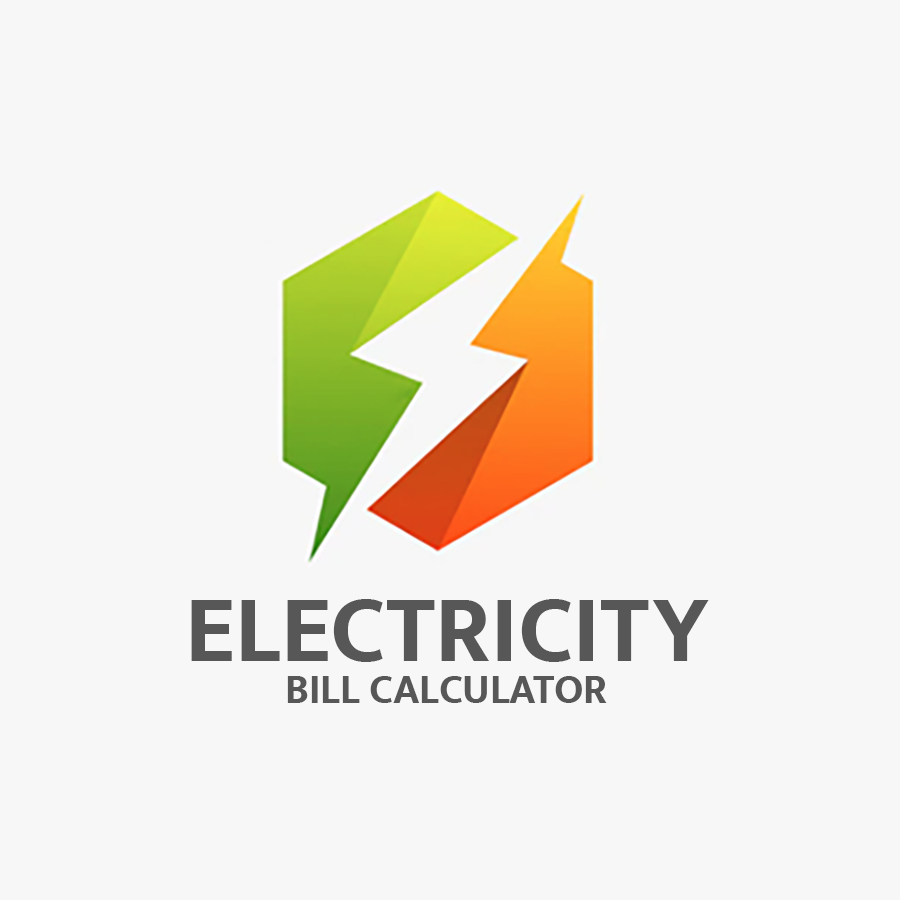
<style>
.page{position:relative;width:900px;height:900px;background:#f7f7f7}
.page>*{position:absolute;margin:0}
.t1{font:97.4px "MuktaMahee-Bold";color:#575757;text-transform:uppercase}
.t2{font:41.7px "MuktaMahee-Bold";color:#575757;text-transform:uppercase}
</style>
<div class="page">
<p class="t1" style="left:191px;top:599px;width:518px;height:63px">Electricity</p>
<p class="t2" style="left:287px;top:676px;width:320px;height:27px">bill calculator</p>
</div>
